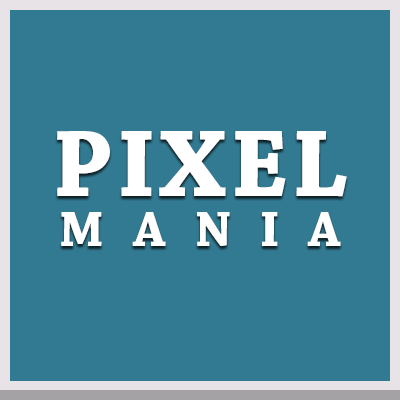
<style>
.page{position:relative;width:400px;height:400px;background:#327a92}
.page>*{position:absolute;margin:0}
.t1{font:100px/50px "ChaparralPro-Bold";letter-spacing:0.04em;color:#ffffff}
.t2{font:51px/50px "ChaparralPro-Bold";letter-spacing:0.56em;color:#ffffff}
</style>
<div class="page">
<p class="t1" style="left:57px;top:131px;width:290px;height:115px;text-align:center">PIXEL<br><span class="t2">MANIA</span></p>
</div>
